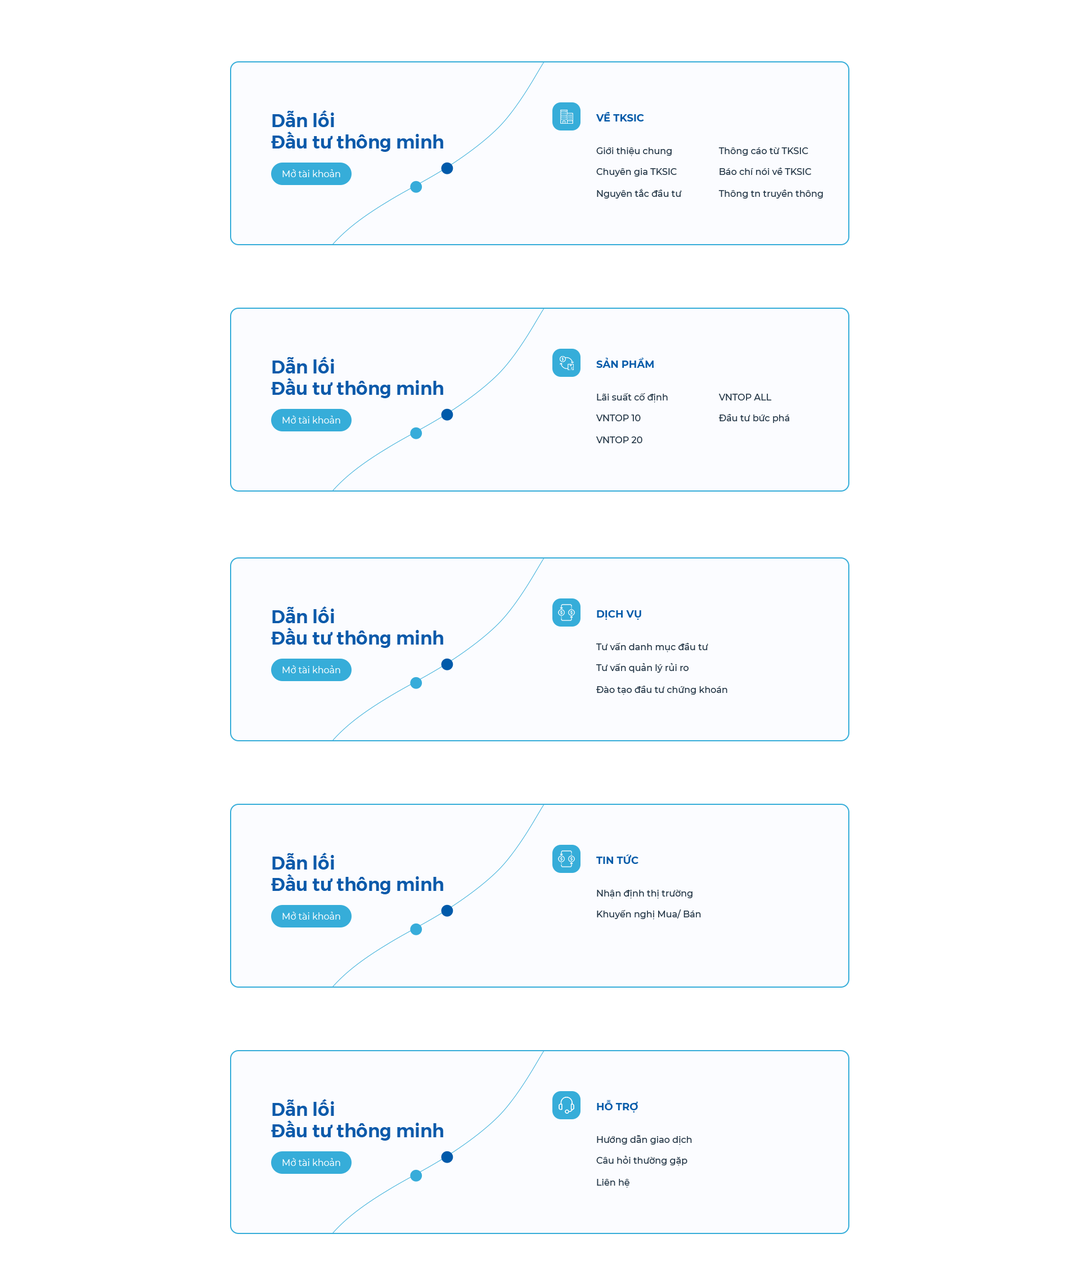
<style>
.page{position:relative;width:1080px;height:1288px;background:#ffffff}
.page>*{position:absolute;margin:0}
.t1{font:18.1px/21.1px "Montserrat-SemiBold";color:#0c5aaa}
.t2{font:10.1px "Montserrat-Bold";color:#055ba9}
.t3{font:9px "Montserrat-Medium";color:#213444}
.t4{font:9px "Montserrat-Regular";color:#ffffff}
</style>
<div class="page">
<p class="t1" style="left:271px;top:110px;width:172px;height:42px">Dẫn lối<br>Đầu tư thông minh</p>
<p class="t2" style="left:596px;top:112px;width:48px;height:10px">VỀ TKSIC</p>
<p class="t3" style="left:596px;top:147px;width:76px;height:9px">Giới thiệu chung</p>
<p class="t3" style="left:718px;top:147px;width:90px;height:9px">Thông cáo từ TKSIC</p>
<p class="t4" style="left:282px;top:169px;width:58px;height:8px">Mở tài khoản</p>
<p class="t3" style="left:596px;top:168px;width:81px;height:9px">Chuyên gia TKSIC</p>
<p class="t3" style="left:719px;top:168px;width:92px;height:7px">Báo chí nói về TKSIC</p>
<p class="t3" style="left:597px;top:189px;width:85px;height:10px">Nguyên tắc đầu tư</p>
<p class="t3" style="left:718px;top:190px;width:105px;height:9px">Thông tn truyền thông</p>
<p class="t1" style="left:271px;top:357px;width:172px;height:41px">Dẫn lối<br>Đầu tư thông minh</p>
<p class="t2" style="left:596px;top:358px;width:58px;height:10px">SẢN PHẨM</p>
<p class="t3" style="left:597px;top:393px;width:71px;height:10px">Lãi suất cố định</p>
<p class="t3" style="left:719px;top:394px;width:53px;height:6px">VNTOP ALL</p>
<p class="t3" style="left:719px;top:414px;width:70px;height:9px">Đầu tư bức phá</p>
<p class="t4" style="left:282px;top:416px;width:58px;height:8px">Mở tài khoản</p>
<p class="t3" style="left:596px;top:415px;width:45px;height:6px">VNTOP 10</p>
<p class="t3" style="left:596px;top:436px;width:46px;height:7px">VNTOP 20</p>
<p class="t1" style="left:271px;top:606px;width:172px;height:42px">Dẫn lối<br>Đầu tư thông minh</p>
<p class="t2" style="left:597px;top:610px;width:44px;height:10px">DỊCH VỤ</p>
<p class="t3" style="left:596px;top:643px;width:112px;height:9px">Tư vấn danh mục đầu tư</p>
<p class="t4" style="left:282px;top:665px;width:58px;height:8px">Mở tài khoản</p>
<p class="t3" style="left:596px;top:663px;width:93px;height:10px">Tư vấn quản lý rủi ro</p>
<p class="t3" style="left:596px;top:686px;width:131px;height:9px">Đào tạo đầu tư chứng khoán</p>
<p class="t1" style="left:271px;top:853px;width:172px;height:41px">Dẫn lối<br>Đầu tư thông minh</p>
<p class="t2" style="left:596px;top:854px;width:42px;height:10px">TIN TỨC</p>
<p class="t3" style="left:597px;top:890px;width:95px;height:9px">Nhận định thị trường</p>
<p class="t4" style="left:282px;top:912px;width:58px;height:8px">Mở tài khoản</p>
<p class="t3" style="left:597px;top:910px;width:104px;height:10px">Khuyến nghị Mua/ Bán</p>
<p class="t1" style="left:271px;top:1099px;width:172px;height:42px">Dẫn lối<br>Đầu tư thông minh</p>
<p class="t2" style="left:597px;top:1100px;width:41px;height:13px">HỖ TRỢ</p>
<p class="t3" style="left:597px;top:1135px;width:95px;height:10px">Hướng dẫn giao dịch</p>
<p class="t3" style="left:596px;top:1156px;width:91px;height:10px">Câu hỏi thường gặp</p>
<p class="t4" style="left:282px;top:1158px;width:58px;height:8px">Mở tài khoản</p>
<p class="t3" style="left:597px;top:1179px;width:32px;height:9px">Liên hệ</p>
</div>
